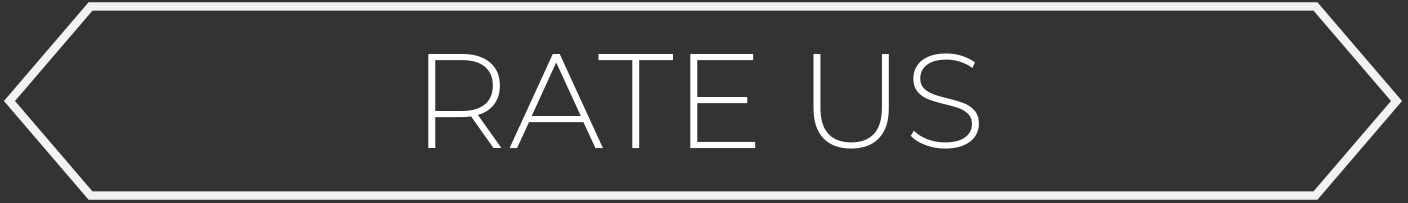
<style>
.page{position:relative;width:1408px;height:203px;background:#333333}
.page>*{position:absolute;margin:0}
.t1{font:134.1px "Montserrat-Light";color:#ffffff}
</style>
<div class="page">
<p class="t1" style="left:428px;top:53px;width:551px;height:96px">RATE US</p>
</div>
